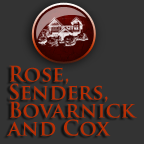
<style>
.page{position:relative;width:144px;height:144px;background:#333333}
.page>*{position:absolute;margin:0}
.t1{font:21px/18px "TrajanPro-Bold";color:#b72e04}
</style>
<div class="page">
<p class="t1" style="left:6px;top:65px;width:131px;height:71px">Rose, <br>Senders, Bovarnick and Cox</p>
</div>
